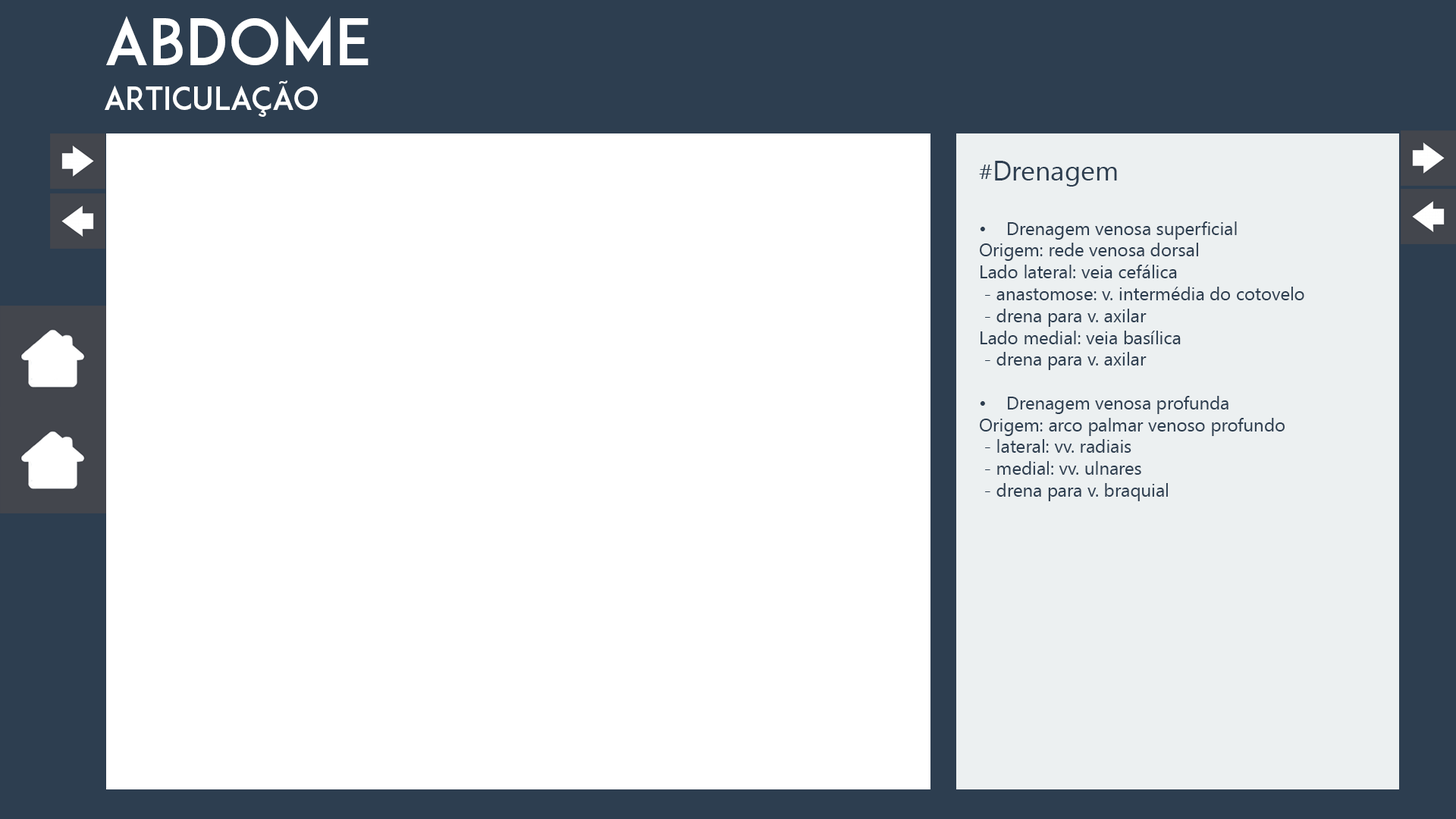
<style>
.page{position:relative;width:1456px;height:819px;background:#ffffff}
.page>*{position:absolute;margin:0}
.t1{font:63.2px "ADAM.CGPRO";color:#ffffff}
.t2{font:31.6px "ADAM.CGPRO";color:#ffffff}
.t3{font:18.2px "SegoeUI";color:#2d3e50}
.t4{font:22.7px "SegoeUI";color:#2d3e50}
.t5{font:27.3px "SegoeUI";color:#2d3e50}
</style>
<div class="page">
<p class="t1" style="left:106px;top:16px;width:263px;height:49px">abdome</p>
<p class="t2" style="left:105px;top:80px;width:213px;height:37px">articulação</p>
<p class="t3" style="left:979px;top:161px;width:325px;height:340px"><span class="t4">#</span><span class="t5">Drenagem<br><br></span>• Drenagem venosa superficial <br>Origem: rede venosa dorsal<br>Lado lateral: veia cefálica<br> - anastomose: v. intermédia do cotovelo<br> - drena para v. axilar<br>Lado medial: veia basílica <br> - drena para v. axilar <br><br>• Drenagem venosa profunda<br>Origem: arco palmar venoso profundo<br> - lateral: vv. radiais <br> - medial: vv. ulnares <br> - drena para v. braquial</p>
</div>
